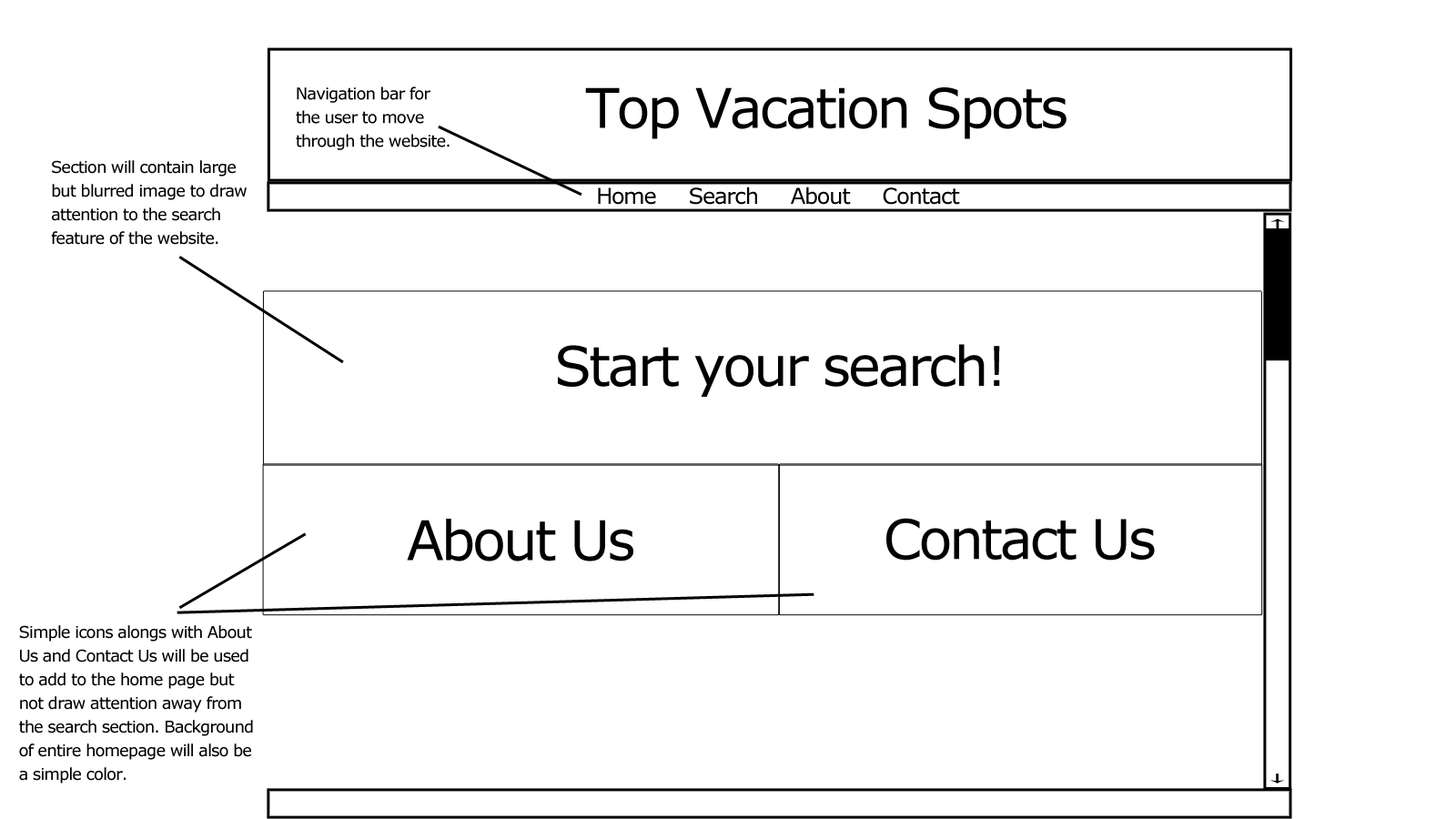
<style>
.page{position:relative;width:1456px;height:819px;background:#ffffff}
.page>*{position:absolute;margin:0}
.t1{font:16.4px/23.7px "Verdana";letter-spacing:-0.05em;color:#000000}
.t2{font:54.6px "Verdana";letter-spacing:-0.05em;color:#000000}
.t3{font:21.8px "Verdana";letter-spacing:-0.05em;color:#000000}
</style>
<div class="page">
<p class="t1" style="left:296px;top:86px;width:154px;height:64px">Navigation bar for <br>the user to move <br>through the website.</p>
<p class="t2" style="left:585px;top:87px;width:482px;height:52px">Top Vacation Spots</p>
<p class="t1" style="left:51px;top:160px;width:196px;height:85px">Section will contain large <br>but blurred image to draw <br>attention to the search <br>feature of the website.</p>
<p class="t3" style="left:598px;top:187px;width:362px;height:18px">Home     Search     About     Contact</p>
<p class="t2" style="left:558px;top:344px;width:442px;height:53px">Start your search!</p>
<p class="t2" style="left:407px;top:519px;width:226px;height:42px">About Us</p>
<p class="t2" style="left:886px;top:518px;width:269px;height:43px">Contact Us</p>
<p class="t1" style="left:19px;top:625px;width:234px;height:158px">Simple icons alongs with About <br>Us and Contact Us will be used <br>to add to the home page but <br>not draw attention away from <br>the search section. Background <br>of entire homepage will also be <br>a simple color.</p>
</div>
